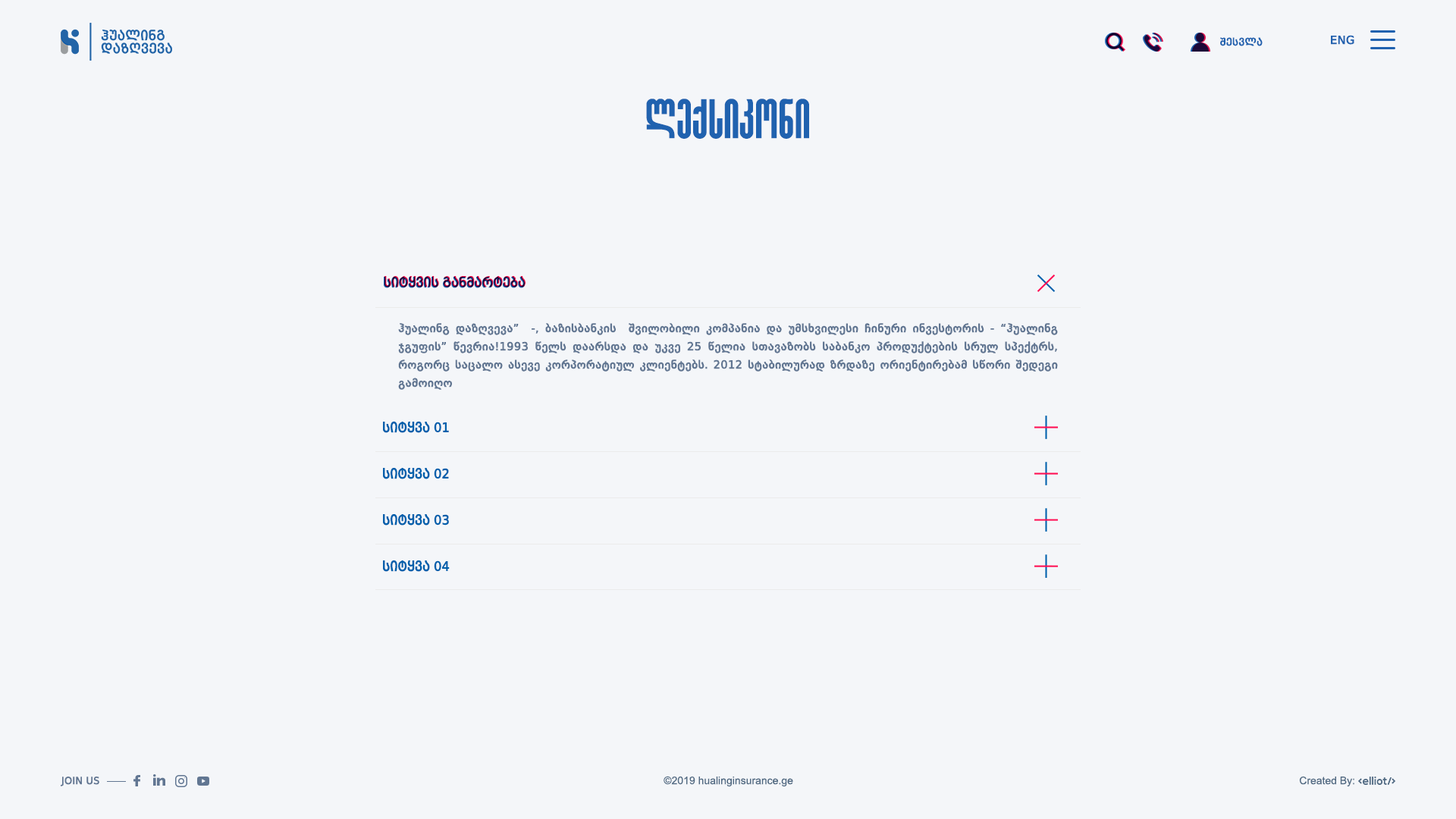
<style>
.page{position:relative;width:1456px;height:819px;background:#f4f6f9}
.page>*{position:absolute;margin:0}
.t1{font:10.6px "BPGWEB001Caps";color:#2062af}
.t2{font:12.1px "BPGWEB001Caps";color:#2062af;text-transform:uppercase}
.t3{font:54.6px "GLGordeziani-Bold";letter-spacing:-0.025em;color:#2062af}
.t4{font:14.1px "BPGWEB001Caps";letter-spacing:-0.025em}
.t5{font:12.1px/18.2px "BPGWEB001";color:#617692}
.t6{font:14.1px "BPGWEB001Caps";letter-spacing:-0.025em;color:#0060ac;scale:0.97 1}
.t7{font:10.6px "BPGWEB001";color:#617692;text-transform:uppercase}
.t8{font:10.6px "BPGArial2010";color:#516a83}
.t9{font:10.5px "BPGArial2010";color:#516a83}
</style>
<div class="page">
<p class="t1" style="left:1220px;top:37px;width:43px;height:9px">შესვლა</p>
<p class="t2" style="left:1331px;top:35px;width:23px;height:10px">Eng</p>
<p class="t3" style="left:646px;top:99px;width:163px;height:40px">ლექსიკონი</p>
<p class="t4" style="left:384px;top:277px;width:141px;height:11px">სიტყვის განმარტება</p>
<p class="t4" style="left:384px;top:276px;width:142px;height:11px">სიტყვის განმარტება</p>
<p class="t5" style="left:398px;top:323px;width:660px;height:67px;text-align:justify">ჰუალინგ დაზღვევა”  -, ბაზისბანკის  შვილობილი კომპანია და უმსხვილესი ჩინური ინვესტორის - “ჰუალინგ ჯგუფის” წევრია!1993 წელს დაარსდა და უკვე 25 წელია სთავაზობს საბანკო პროდუქტების სრულ სპექტრს, როგორც საცალო ასევე კორპორატიულ კლიენტებს. 2012 სტაბილურად ზრდაზე ორიენტირებამ სწორი შედეგი გამოიღო</p>
<p class="t6" style="left:383px;top:421px;width:66px;height:12px">სიტყვა 01</p>
<p class="t6" style="left:383px;top:467px;width:66px;height:12px">სიტყვა 02</p>
<p class="t6" style="left:383px;top:514px;width:66px;height:12px">სიტყვა 03</p>
<p class="t6" style="left:383px;top:560px;width:67px;height:12px">სიტყვა 04</p>
<p class="t7" style="left:61px;top:777px;width:38px;height:9px">join us</p>
<p class="t8" style="left:664px;top:776px;width:129px;height:11px">©2019 hualinginsurance.ge</p>
<p class="t9" style="left:1299px;top:776px;width:55px;height:10px">Created By:</p>
</div>
